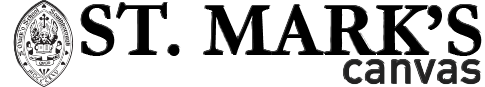
<style>
.page{position:relative;width:485px;height:87px;background:#ffffff}
.page>*{position:absolute;margin:0}
.t1{font:75.7px "Garamond-Bold";color:#000000}
</style>
<div class="page">
<p class="t1" style="left:81px;top:3px;width:401px;height:53px">ST. MARK’S</p>
</div>
